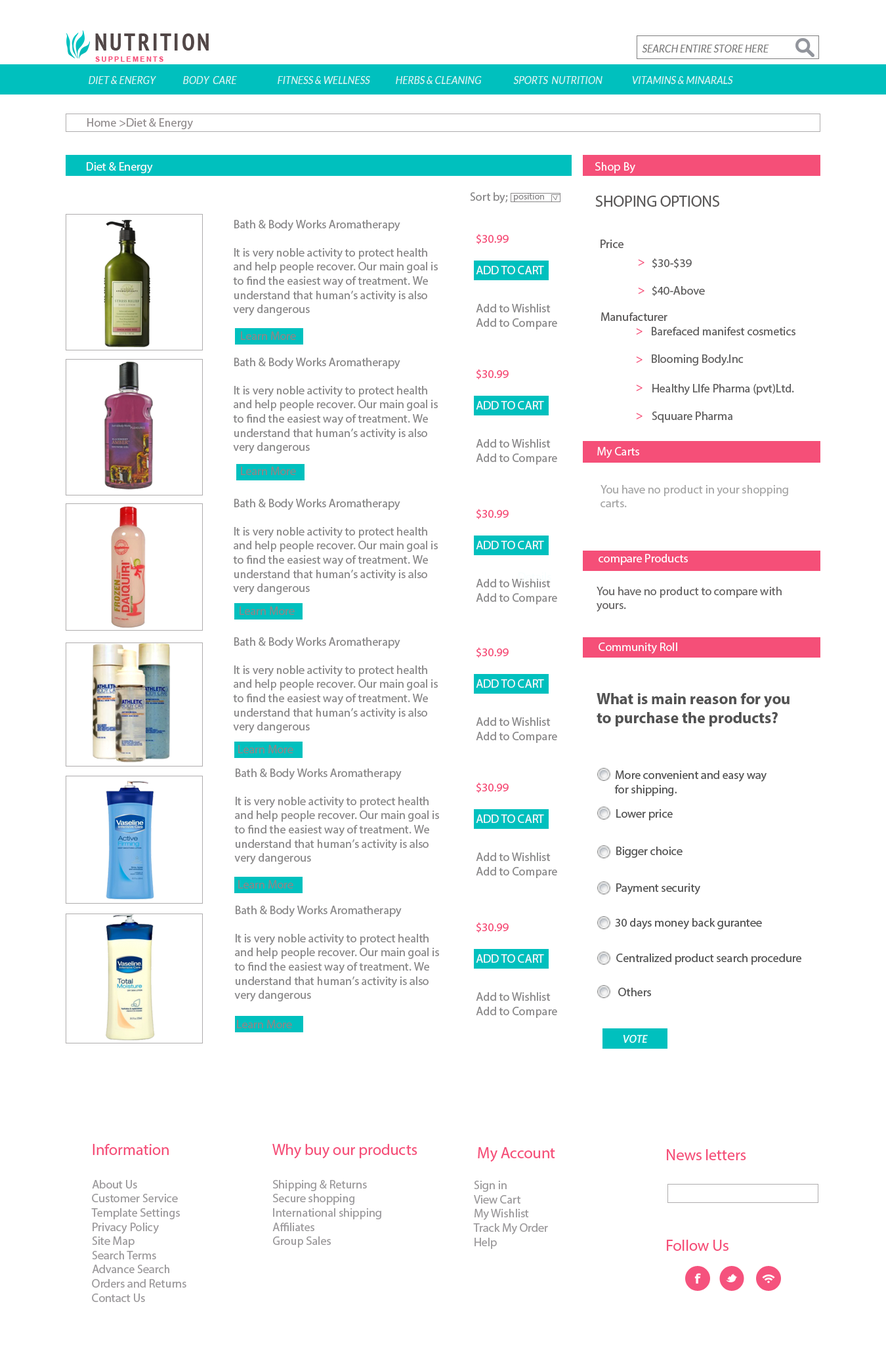
<style>
.page{position:relative;width:886px;height:1346px;background:#ffffff}
.page>*{position:absolute;margin:0}
.t1{font:11px "Lato-Regular";letter-spacing:0.005em;color:#7d7d7d;text-transform:uppercase;font-style:italic;scale:0.83 1}
.t2{font:11px "Lato-Regular";letter-spacing:0.005em;color:#dff3f3;text-transform:uppercase;font-style:italic;scale:0.83 1}
.t3{font:11.8px "MyriadPro-Regular";color:#959091}
.t4{font:11.8px "MyriadPro-Regular";color:#fef9fa}
.t5{font:11.8px "MyriadPro-Regular";color:#898889}
.t6{font:9.2px "MyriadPro-Regular";color:#898889}
.t7{font:15.7px "MyriadPro-Regular";color:#5a5858}
.t8{font:11.8px "MyriadPro-Regular";color:#f54f78}
.t9{font:11.8px "MyriadPro-Regular";color:#5a5858}
.t10{font:11.8px "MyriadPro-Regular";color:#605f5f}
.t11{font:11.8px "MyriadPro-Regular";color:#fef6fa}
.t12{font:11.8px "MyriadPro-Regular";color:#fdf9fa}
.t13{font:11.8px "MyriadPro-Regular";color:#a7a7a7}
.t14{font:11.8px "MyriadPro-Regular";color:#fffcfd}
.t15{font:11.8px "MyriadPro-Regular";color:#676565}
.t16{font:11.8px "MyriadPro-Regular";color:#fcf9fa}
.t17{font:15.7px "MyriadPro-Bold";color:#535353}
.t18{font:11.8px "MyriadPro-Regular";color:#535353}
.t19{font:11px "Lato-Bold";letter-spacing:0.005em;color:#effdfd;text-transform:uppercase;font-style:italic;scale:0.83 1}
.t20{font:15.7px "MyriadPro-Regular";color:#f54f78}
.t21{font:11.8px "MyriadPro-Regular";color:#9c9a9c}
</style>
<div class="page">
<p class="t1" style="left:642px;top:45px;width:127px;height:7px">search entire store here</p>
<p class="t2" style="left:89px;top:76px;width:644px;height:8px">diet &amp; energy   body  care  fitness &amp; wellness  herbs &amp; cleaning  sports  nutrition  vitamins &amp; minarals</p>
<p class="t3" style="left:87px;top:118px;width:106px;height:11px">Home &gt;Diet &amp; Energy</p>
<p class="t4" style="left:87px;top:162px;width:66px;height:11px">Diet &amp; Energy</p>
<p class="t4" style="left:595px;top:162px;width:40px;height:11px">Shop By</p>
<p class="t5" style="left:470px;top:192px;width:38px;height:11px">Sort by;</p>
<p class="t6" style="left:514px;top:193px;width:30px;height:8px">position</p>
<p class="t6" style="left:553px;top:195px;width:5px;height:5px;rotate:83deg">&gt;</p>
<p class="t7" style="left:595px;top:196px;width:124px;height:11px">SHOPING OPTIONS</p>
<p class="t5" style="left:233px;top:220px;width:205px;height:96px">Bath &amp; Body Works Aromatherapy<br><br>It is very noble activity to protect health and help people recover. Our main goal is to find the easiest way of treatment. We understand that human’s activity is also very dangerous</p>
<p class="t8" style="left:476px;top:234px;width:33px;height:10px">$30.99</p>
<p class="t9" style="left:600px;top:240px;width:23px;height:8px">Price</p>
<p class="t10" style="left:652px;top:258px;width:40px;height:10px">$30-$39</p>
<p class="t11" style="left:476px;top:266px;width:68px;height:8px">ADD TO CART</p>
<p class="t8" style="left:638px;top:259px;width:6px;height:35px">&gt;<br><br>&gt;</p>
<p class="t10" style="left:652px;top:285px;width:53px;height:11px">$40-Above</p>
<p class="t5" style="left:476px;top:304px;width:81px;height:25px">Add to Wishlist<br>    Add to Compare</p>
<p class="t9" style="left:601px;top:312px;width:66px;height:9px">Manufacturer</p>
<p class="t8" style="left:636px;top:328px;width:6px;height:91px">&gt;<br><br>&gt;<br><br>&gt;<br><br>&gt;</p>
<p class="t10" style="left:652px;top:327px;width:143px;height:8px">Barefaced manifest cosmetics</p>
<p class="t5" style="left:241px;top:331px;width:55px;height:9px">Learn More</p>
<p class="t5" style="left:233px;top:358px;width:205px;height:95px">Bath &amp; Body Works Aromatherapy<br><br>It is very noble activity to protect health and help people recover. Our main goal is to find the easiest way of treatment. We understand that human’s activity is also very dangerous</p>
<p class="t10" style="left:652px;top:354px;width:92px;height:12px">Blooming Body.Inc</p>
<p class="t8" style="left:476px;top:369px;width:33px;height:10px">$30.99</p>
<p class="t10" style="left:652px;top:384px;width:142px;height:11px">Healthy LIfe Pharma (pvt)Ltd.</p>
<p class="t11" style="left:476px;top:401px;width:68px;height:8px">ADD TO CART</p>
<p class="t10" style="left:652px;top:411px;width:80px;height:12px">Squuare Pharma</p>
<p class="t5" style="left:476px;top:439px;width:81px;height:26px">Add to Wishlist<br>    Add to Compare</p>
<p class="t12" style="left:597px;top:447px;width:42px;height:11px">My Carts</p>
<p class="t5" style="left:241px;top:467px;width:55px;height:8px">Learn More</p>
<p class="t13" style="left:600px;top:485px;width:188px;height:22px">You have no product in your shopping carts.</p>
<p class="t5" style="left:233px;top:499px;width:205px;height:96px">Bath &amp; Body Works Aromatherapy<br><br>It is very noble activity to protect health and help people recover. Our main goal is to find the easiest way of treatment. We understand that human’s activity is also very dangerous</p>
<p class="t8" style="left:476px;top:509px;width:33px;height:10px">$30.99</p>
<p class="t11" style="left:476px;top:541px;width:68px;height:8px">ADD TO CART</p>
<p class="t14" style="left:598px;top:554px;width:90px;height:11px">compare Products</p>
<p class="t5" style="left:476px;top:579px;width:81px;height:25px">Add to Wishlist<br>    Add to Compare</p>
<p class="t15" style="left:597px;top:587px;width:185px;height:25px">You have no product to compare with yours.</p>
<p class="t5" style="left:240px;top:606px;width:55px;height:9px">Learn More</p>
<p class="t5" style="left:233px;top:637px;width:205px;height:96px">Bath &amp; Body Works Aromatherapy<br><br>It is very noble activity to protect health and help people recover. Our main goal is to find the easiest way of treatment. We understand that human’s activity is also very dangerous</p>
<p class="t8" style="left:476px;top:647px;width:33px;height:11px">$30.99</p>
<p class="t16" style="left:598px;top:642px;width:79px;height:12px">Community Roll</p>
<p class="t11" style="left:476px;top:679px;width:68px;height:9px">ADD TO CART</p>
<p class="t17" style="left:597px;top:693px;width:192px;height:33px">What is main reason for you<br>to purchase the products?</p>
<p class="t5" style="left:476px;top:717px;width:81px;height:26px">Add to Wishlist<br>    Add to Compare</p>
<p class="t5" style="left:238px;top:745px;width:55px;height:8px">Learn More</p>
<p class="t5" style="left:234px;top:768px;width:205px;height:96px">Bath &amp; Body Works Aromatherapy<br><br>It is very noble activity to protect health and help people recover. Our main goal is to find the easiest way of treatment. We understand that human’s activity is also very dangerous</p>
<p class="t18" style="left:614px;top:770px;width:152px;height:26px">More convenient and easy way<br>for shipping.</p>
<p class="t8" style="left:476px;top:782px;width:33px;height:11px">$30.99</p>
<p class="t18" style="left:616px;top:809px;width:57px;height:11px">Lower price</p>
<p class="t11" style="left:476px;top:814px;width:68px;height:9px">ADD TO CART</p>
<p class="t5" style="left:476px;top:852px;width:81px;height:26px">Add to Wishlist<br>    Add to Compare</p>
<p class="t18" style="left:616px;top:847px;width:66px;height:11px">Bigger choice</p>
<p class="t5" style="left:238px;top:880px;width:55px;height:9px">Learn More</p>
<p class="t18" style="left:616px;top:883px;width:84px;height:11px">Payment security</p>
<p class="t5" style="left:234px;top:906px;width:205px;height:95px">Bath &amp; Body Works Aromatherapy<br><br>It is very noble activity to protect health and help people recover. Our main goal is to find the easiest way of treatment. We understand that human’s activity is also very dangerous</p>
<p class="t8" style="left:476px;top:922px;width:33px;height:11px">$30.99</p>
<p class="t18" style="left:615px;top:918px;width:147px;height:11px">30 days money back gurantee</p>
<p class="t18" style="left:616px;top:954px;width:185px;height:11px">Centralized product search procedure</p>
<p class="t11" style="left:476px;top:954px;width:68px;height:9px">ADD TO CART</p>
<p class="t18" style="left:618px;top:988px;width:33px;height:8px">Others</p>
<p class="t5" style="left:476px;top:992px;width:81px;height:26px">Add to Wishlist<br>    Add to Compare</p>
<p class="t5" style="left:237px;top:1020px;width:55px;height:8px">Learn More</p>
<p class="t19" style="left:623px;top:1035px;width:25px;height:8px">vote</p>
<p class="t20" style="left:93px;top:1144px;width:76px;height:11px">Information</p>
<p class="t20" style="left:272px;top:1144px;width:145px;height:14px">Why buy our products</p>
<p class="t20" style="left:478px;top:1147px;width:77px;height:15px">My Account</p>
<p class="t20" style="left:667px;top:1149px;width:79px;height:11px">News letters</p>
<p class="t21" style="left:91px;top:1180px;width:95px;height:122px">About Us<br>Customer Service<br>Template Settings<br>Privacy Policy<br>Site Map<br>Search Terms<br>Advance Search<br>Orders and Returns<br>Contact Us</p>
<p class="t21" style="left:272px;top:1180px;width:109px;height:68px">Shipping &amp; Returns<br>Secure shopping<br>International shipping<br>Affiliates<br>Group Sales</p>
<p class="t21" style="left:473px;top:1181px;width:75px;height:68px">Sign in<br>View Cart<br>My Wishlist<br>Track My Order<br>Help</p>
<p class="t20" style="left:667px;top:1240px;width:61px;height:11px">Follow Us</p>
</div>
